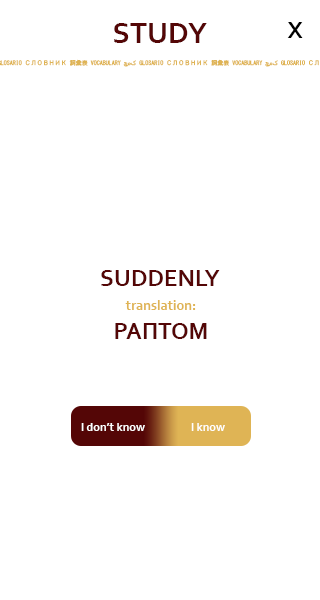
<style>
.page{position:relative;width:320px;height:600px;background:#ffffff}
.page>*{position:absolute;margin:0}
.t1{font:30px "Corbel-Bold";color:#540606}
.t2{font:24px "Corbel-Bold";color:#000000}
.t3{font:24px "Corbel-Bold";color:#540606}
.t4{font:14px "Corbel-Bold";color:#dfb455}
.t5{font:12px "Corbel-Bold";color:#ffffff}
</style>
<div class="page">
<p class="t1" style="left:114px;top:23px;width:93px;height:20px">STUDY</p>
<p class="t2" style="left:287px;top:22px;width:16px;height:16px">X</p>
<p class="t3" style="left:101px;top:270px;width:119px;height:16px">SUDDENLY</p>
<p class="t4" style="left:115px;top:300px;width:92px;height:39px;text-align:center">translation:<br><span class="t3">РАПТОМ</span></p>
<p class="t5" style="left:81px;top:423px;width:64px;height:8px">l don’t know</p>
<p class="t5" style="left:191px;top:423px;width:34px;height:8px">l know</p>
</div>
